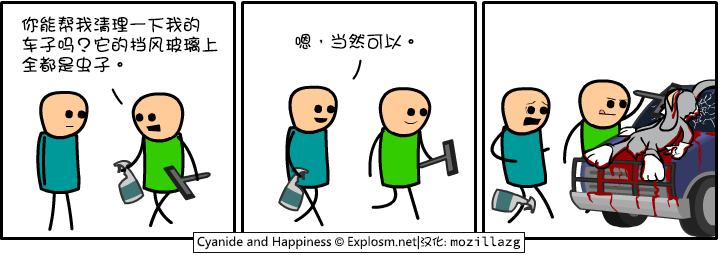
<style>
.page{position:relative;width:720px;height:255px;background:#ffffff}
.page>*{position:absolute;margin:0}
.t1{font:18px/20px "DFGirl";color:#000000}
.t2{font:18px "DFGirl";color:#000000}
</style>
<div class="page">
<p class="t1" style="left:21px;top:16px;width:197px;height:57px">你能帮我清理一下我的<br>车子吗？它的挡风玻璃上<br>全都是虫子。</p>
<p class="t2" style="left:295px;top:33px;width:119px;height:17px">嗯，当然可以。</p>
</div>
